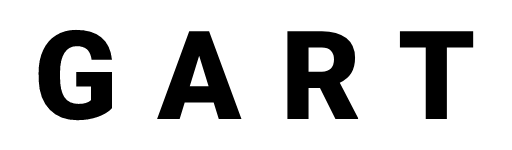
<style>
.page{position:relative;width:512px;height:150px;background:#ffffff}
.page>*{position:absolute;margin:0}
.t1{font:123.6px "Roboto-Black";letter-spacing:0.321em;color:#000000}
</style>
<div class="page">
<p class="t1" style="left:38px;top:29px;width:436px;height:92px">GART</p>
</div>
